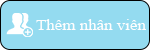
<style>
.page{position:relative;width:150px;height:50px;background:#94dbf0}
.page>*{position:absolute;margin:0}
.t1{font:15.1px "TimesNewRomanPSMT";color:#fefefe;scale:1.12 1}
</style>
<div class="page">
<p class="t1" style="left:36px;top:19px;width:110px;height:11px">Thêm nhân viên</p>
</div>
